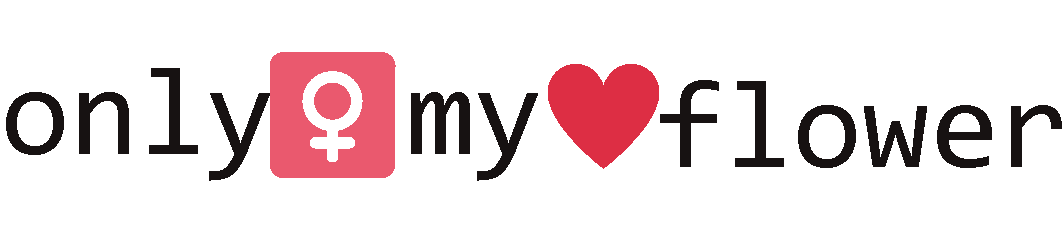
<style>
.page{position:relative;width:1064px;height:227px;background:#ffffff}
.page>*{position:absolute;margin:0}
.t1{font:125px "Consolas";color:#171212}
.t2{font:125px "TwitterColorEmojiSVGinOT";color:#171212}
</style>
<div class="page">
<p class="t1" style="left:6px;top:68px;width:264px;height:113px">only</p>
<p class="t1" style="left:660px;top:80px;width:402px;height:88px">flower</p>
<p class="t1" style="left:411px;top:92px;width:127px;height:89px"><span class="t2">   </span>my</p>
</div>
